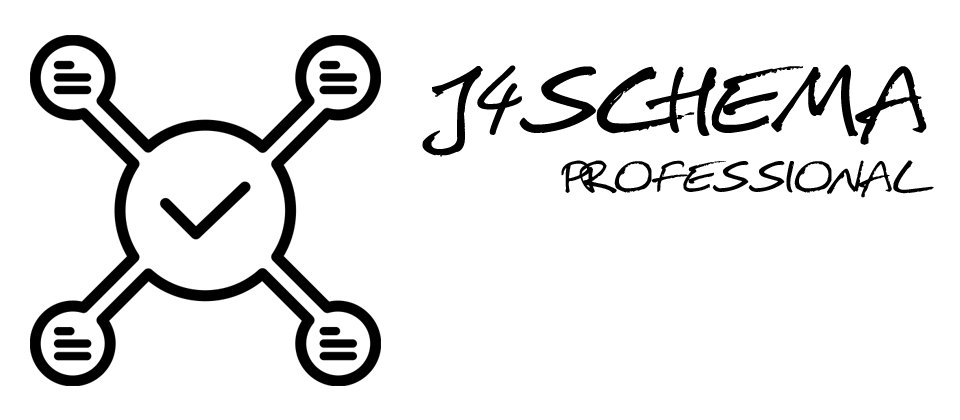
<style>
.page{position:relative;width:960px;height:420px;background:#ffffff}
.page>*{position:absolute;margin:0}
.t1{font:125px "Christopherhand";color:#000000;font-style:italic}
.t2{font:58.3px "Christopherhand";color:#000000;font-style:italic}
</style>
<div class="page">
<p class="t1" style="left:422px;top:64px;width:505px;height:93px">J4SCHEMA</p>
<p class="t2" style="left:561px;top:160px;width:373px;height:38px">PROFESSIONAL</p>
</div>
